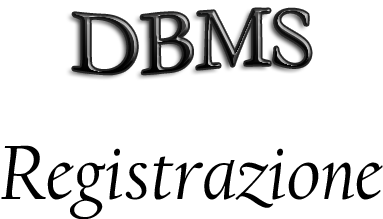
<style>
.page{position:relative;width:383px;height:219px;background:#ffffff}
.page>*{position:absolute;margin:0}
.t1{font:90px "Garamond"}
.t2{font:80px "CalifornianFB-Italic";color:#000000}
</style>
<div class="page">
<p class="t1" style="left:73px;top:9px;width:238px;height:65px">DBMS</p>
<p class="t2" style="left:1px;top:145px;width:382px;height:75px">Registrazione</p>
</div>
